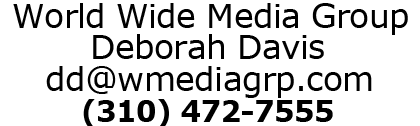
<style>
.page{position:relative;width:420px;height:126px;background:#ffffff}
.page>*{position:absolute;margin:0}
.t1{font:33.3px "Verdana";letter-spacing:-0.025em;color:#000000}
.t2{font:29.2px "Verdana-Bold";letter-spacing:-0.025em;color:#000000}
</style>
<div class="page">
<p class="t1" style="left:13px;top:3px;width:395px;height:32px">World Wide Media Group</p>
<p class="t1" style="left:93px;top:34px;width:231px;height:25px">Deborah Davis</p>
<p class="t1" style="left:46px;top:66px;width:326px;height:32px">dd@wmediagrp.com</p>
<p class="t2" style="left:83px;top:99px;width:250px;height:29px">(310) 472-7555</p>
</div>
